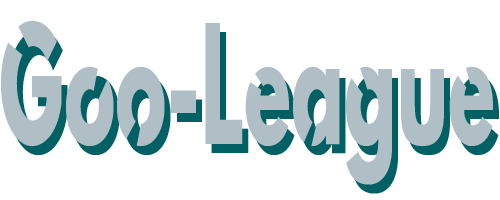
<style>
.page{position:relative;width:500px;height:200px;background:#ffffff}
.page>*{position:absolute;margin:0}
.t1{font:146.8px "LeagueSpartan-Bold";scale:0.53 1}
</style>
<div class="page">
<p class="t1" style="left:7px;top:30px;width:492px;height:164px">Goo-League -League -</p>
</div>
